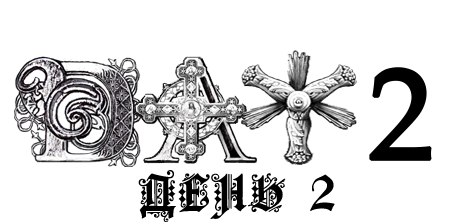
<style>
.page{position:relative;width:472px;height:222px;background:#ffffff}
.page>*{position:absolute;margin:0}
.t1{font:48px "FortunaGothicFlorishC";letter-spacing:0.05em;color:#000000}
</style>
<div class="page">
<p class="t1" style="left:138px;top:170px;width:197px;height:53px">ДЕНЬ 2</p>
</div>
